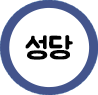
<style>
.page{position:relative;width:98px;height:95px;background:#ffffff}
.page>*{position:absolute;margin:0}
.t1{font:30px "BMJUA";color:#000000}
</style>
<div class="page">
<p class="t1" style="left:25px;top:35px;width:48px;height:25px">성당</p>
</div>
